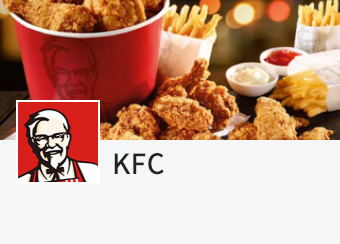
<style>
.page{position:relative;width:340px;height:244px;background:#f4f6f8}
.page>*{position:absolute;margin:0}
.t1{font:28px "SourceHanSansCN-Medium";color:#222222}
</style>
<div class="page">
<p class="t1" style="left:114px;top:153px;width:50px;height:22px">KFC</p>
</div>
